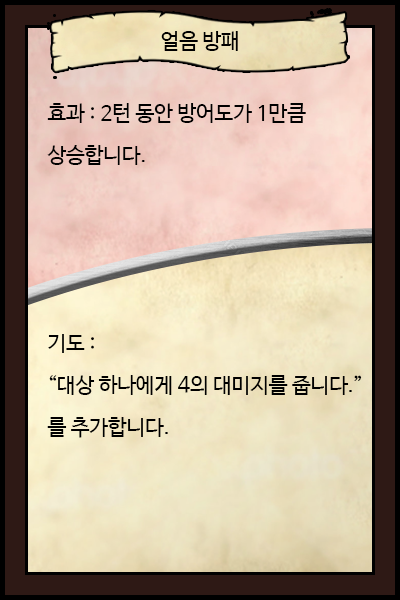
<style>
.page{position:relative;width:400px;height:600px}
.page>*{position:absolute;margin:0}
.t1{font:20.8px "NanumBarunGothic";color:#000000}
.t2{font:20.8px/41.7px "NanumBarunGothic";color:#000000}
</style>
<div class="page">
<p class="t1" style="left:161px;top:31px;width:77px;height:20px">얼음 방패</p>
<p class="t2" style="left:47px;top:103px;width:259px;height:62px">효과 : 2턴 동안 방어도가 1만큼<br>상승합니다.</p>
<p class="t2" style="left:47px;top:334px;width:315px;height:104px">기도 : <br>“대상 하나에게 4의 대미지를 줍니다.”<br>를 추가합니다.</p>
</div>
